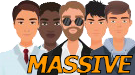
<style>
.page{position:relative;width:135px;height:75px}
.page>*{position:absolute;margin:0}
.t1{font:24px "Tahoma-Bold";letter-spacing:-0.065em;font-weight:bold;font-style:italic}
</style>
<div class="page">
<p class="t1" style="left:26px;top:55px;width:107px;height:19px">MASSIVE</p>
</div>
